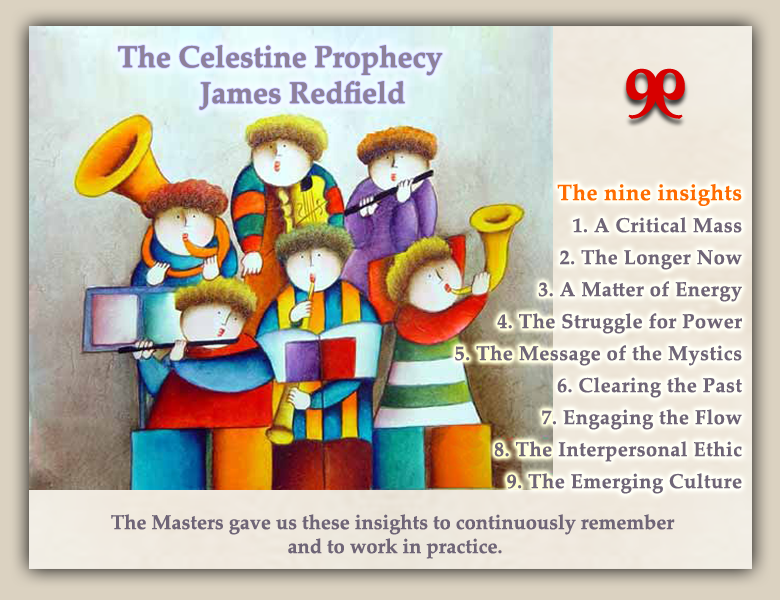
<style>
.page{position:relative;width:780px;height:600px}
.page>*{position:absolute;margin:0}
.t1{font:30px/36px "PalatinoLinotype-Bold";color:#8e8198}
.t2{font:20px/32px "PalatinoLinotype-Bold";letter-spacing:0.025em;color:#6f6577}
.t3{font:22px/32px "PalatinoLinotype-Bold";letter-spacing:0.025em;color:#ff6c00}
.t4{font:20px/24px "PalatinoLinotype-Bold";color:#6f6577}
</style>
<div class="page">
<p class="t1" style="left:118px;top:45px;width:325px;height:65px;text-align:center">The Celestine Prophecy<br>      James Redfield</p>
<p class="t2" style="left:455px;top:183px;width:287px;height:311px;text-align:right"><span class="t3">The nine insights<br></span>1. A Critical Mass<br>2. The Longer Now<br>3. A Matter of Energy<br>4. The Struggle for Power<br>5. The Message of the Mystics<br>6. Clearing the Past<br>7. Engaging the Flow<br>8. The Interpersonal Ethic<br>9. The Emerging Culture</p>
<p class="t4" style="left:111px;top:514px;width:564px;height:45px;text-align:center">The Masters gave us these insights to continuously remember <br>and to work in practice.</p>
</div>
